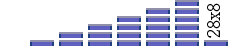
<style>
.page{position:relative;width:230px;height:48px;background:#ffffff}
.page>*{position:absolute;margin:0}
.t1{font:17px "AdobeMingStd-Light";color:#000000}
</style>
<div class="page">
<p class="t1" style="left:207px;top:3px;width:13px;height:35px;rotate:-90deg">28x8</p>
</div>
